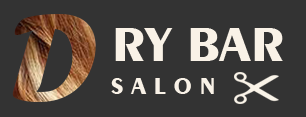
<style>
.page{position:relative;width:306px;height:117px;background:#333333}
.page>*{position:absolute;margin:0}
.t1{font:127.7px "ForteMT"}
.t2{font:50px "Exotic350BT-Bold";color:#f9f2e7}
.t3{font:24px "Exotic350BT-Bold";color:#f9f2e7}
</style>
<div class="page">
<p class="t1" style="left:12px;top:14px;width:84px;height:88px">D</p>
<p class="t2" style="left:115px;top:28px;width:168px;height:33px">RY BAR</p>
<p class="t3" style="left:111px;top:78px;width:103px;height:16px">S A L O N</p>
</div>
